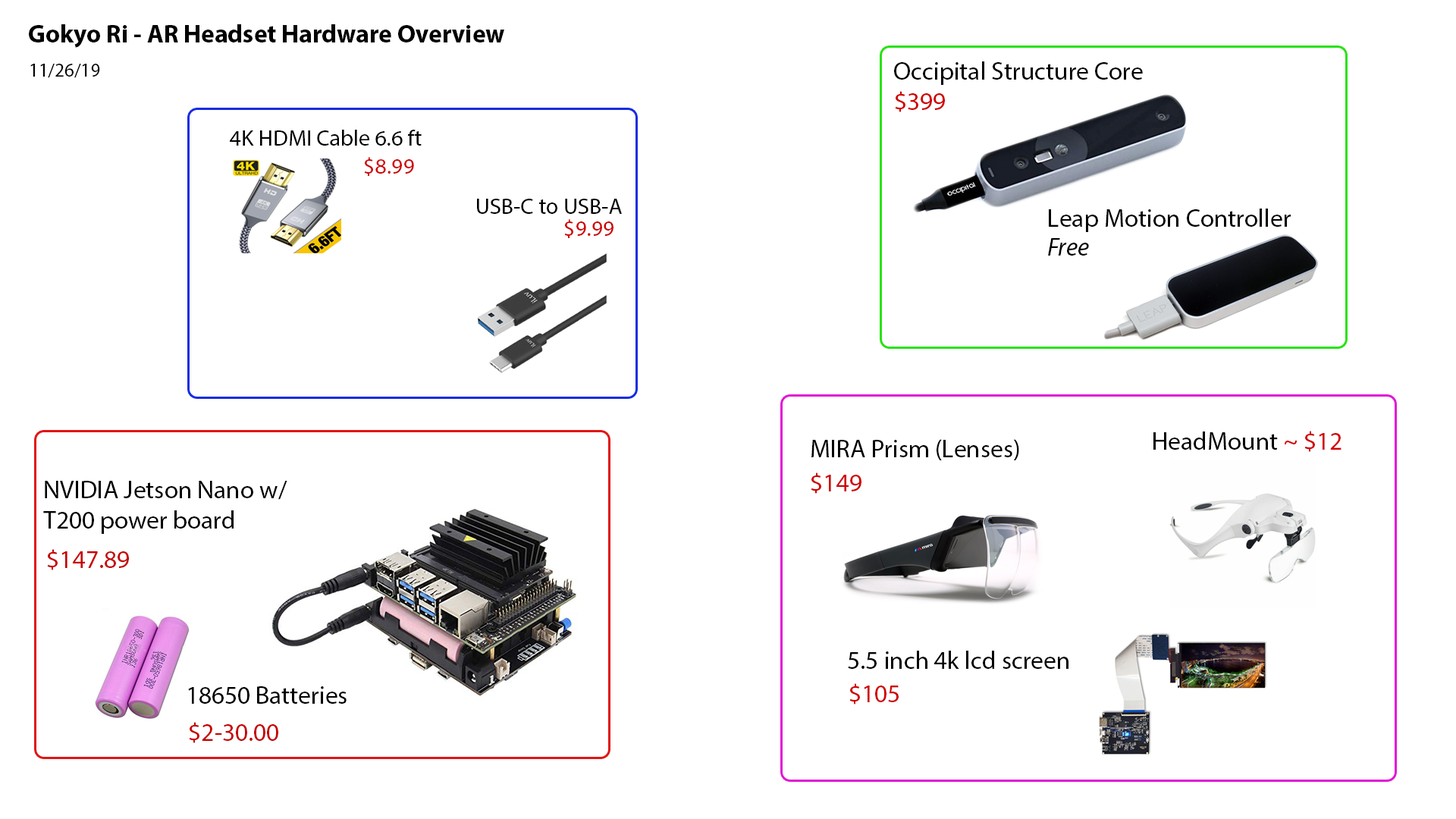
<style>
.page{position:relative;width:1456px;height:819px;background:#ffffff}
.page>*{position:absolute;margin:0}
.t1{font:25.3px "MyriadPro-Bold";color:#020202}
.t2{font:19px "MyriadPro-Regular";color:#020202}
.t3{font:25.3px "MyriadPro-Regular";color:#000000}
.t4{font:25.3px "MyriadPro-Regular";color:#cf0000}
.t5{font:22.3px "MyriadPro-Regular";color:#000000}
.t6{font:22.3px "MyriadPro-Regular";color:#cf0000}
.t7{font:25.3px "MyriadPro-It";color:#000000}
.t8{font:25.3px "MyriadPro-Regular";color:#d10000}
.t9{font:25.3px "MyriadPro-Regular";color:#c70000}
</style>
<div class="page">
<p class="t1" style="left:29px;top:24px;width:475px;height:24px">Gokyo Ri - AR Headset Hardware Overview</p>
<p class="t2" style="left:30px;top:64px;width:70px;height:14px">11/26/19</p>
<p class="t3" style="left:894px;top:61px;width:249px;height:24px">Occipital Structure Core</p>
<p class="t4" style="left:895px;top:91px;width:50px;height:21px">$399</p>
<p class="t5" style="left:230px;top:130px;width:192px;height:16px">4K HDMI Cable 6.6 ft</p>
<p class="t6" style="left:364px;top:157px;width:50px;height:19px">$8.99</p>
<p class="t5" style="left:477px;top:199px;width:145px;height:15px">USB-C to USB-A</p>
<p class="t3" style="left:1049px;top:209px;width:242px;height:23px">Leap Motion Controller</p>
<p class="t6" style="left:564px;top:219px;width:49px;height:19px">$9.99</p>
<p class="t7" style="left:1048px;top:238px;width:41px;height:18px">Free</p>
<p class="t3" style="left:1153px;top:431px;width:188px;height:21px">HeadMount <span class="t8">~ $12</span></p>
<p class="t3" style="left:811px;top:439px;width:208px;height:21px">MIRA Prism (Lenses)</p>
<p class="t4" style="left:811px;top:472px;width:50px;height:22px">$149</p>
<p class="t3" style="left:43px;top:481px;width:244px;height:53px">NVIDIA Jetson Nano w/ <br>T200 power board</p>
<p class="t9" style="left:47px;top:549px;width:82px;height:21px">$147.89</p>
<p class="t3" style="left:848px;top:651px;width:220px;height:18px">5.5 inch 4k lcd screen</p>
<p class="t3" style="left:188px;top:686px;width:159px;height:18px">18650 Batteries</p>
<p class="t4" style="left:849px;top:683px;width:50px;height:21px">$105</p>
<p class="t9" style="left:189px;top:722px;width:89px;height:21px">$2-30.00</p>
</div>
